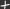
<style>
.page{position:relative;width:10px;height:9px;background:#333333}
.page>*{position:absolute;margin:0}
.t1{font:16px "ThrowMyHandsUpintheAir";color:#ffffff;text-transform:uppercase}
</style>
<div class="page">
<p class="t1" style="left:0px;top:0px;width:10px;height:9px">+</p>
</div>
